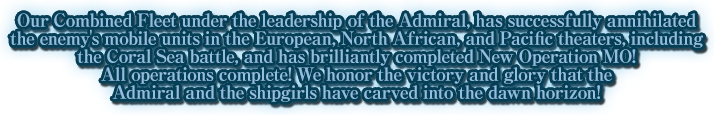
<style>
.page{position:relative;width:714px;height:115px;background:#053f55}
.page>*{position:absolute;margin:0}
.t1{font:18px/18px "RyuminPro-ExBold";letter-spacing:-0.04em;color:#93bee0}
</style>
<div class="page">
<p class="t1" style="left:10px;top:13px;width:693px;height:89px;text-align:center">Our Combined Fleet under the leadership of the Admiral, has successfully annihilated<br>the enemy's mobile units in the European, North African, and Pacific theaters, including<br>the Coral Sea battle, and has brilliantly completed New Operation MO!<br>All operations complete! We honor the victory and glory that the<br>Admiral and the shipgirls have carved into the dawn horizon!</p>
</div>
